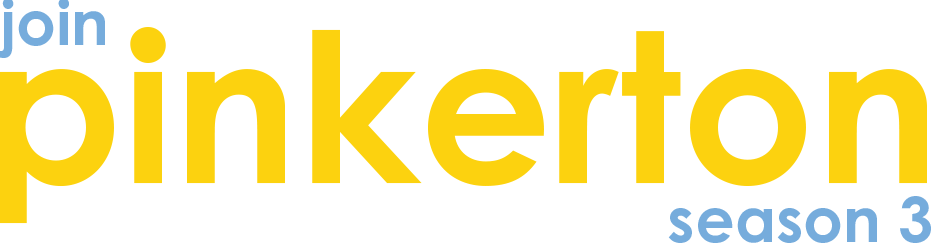
<style>
.page{position:relative;width:934px;height:243px;background:#ffffff}
.page>*{position:absolute;margin:0}
.t1{font:208.3px "CenturyGothicPro-Bold";color:#fcd20f}
.t2{font:62.5px "CenturyGothicPro-Bold";color:#76acdc}
</style>
<div class="page">
<p class="t1" style="left:0px;top:27px;width:927px;height:197px">pinkerton</p>
<p class="t2" style="left:668px;top:196px;width:263px;height:47px">season 3</p>
</div>
